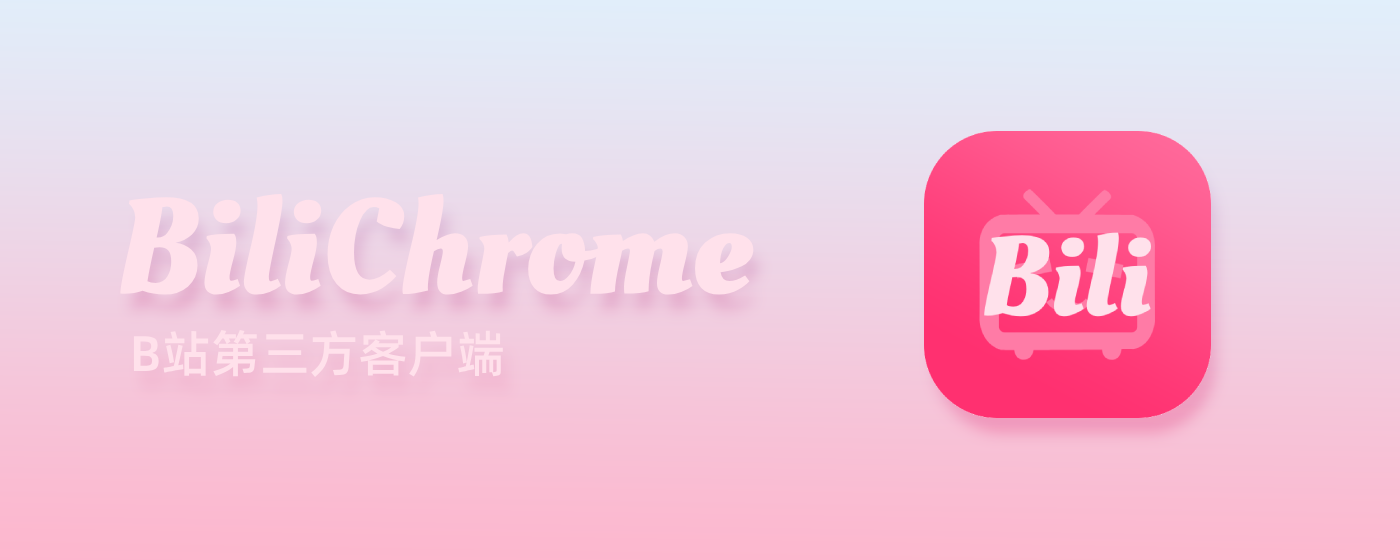
<style>
.page{position:relative;width:1400px;height:560px}
.page>*{position:absolute;margin:0}
.t1{font:135px "OleoScript-Bold";color:#ffe1eb}
.t2{font:50px "AlibabaPuHuiTi-Medium";color:#ffe1eb}
</style>
<div class="page">
<p class="t1" style="left:120px;top:193px;width:634px;height:102px">BiliChrome</p>
<p class="t2" style="left:133px;top:330px;width:370px;height:47px">B站第三方客户端</p>
</div>
